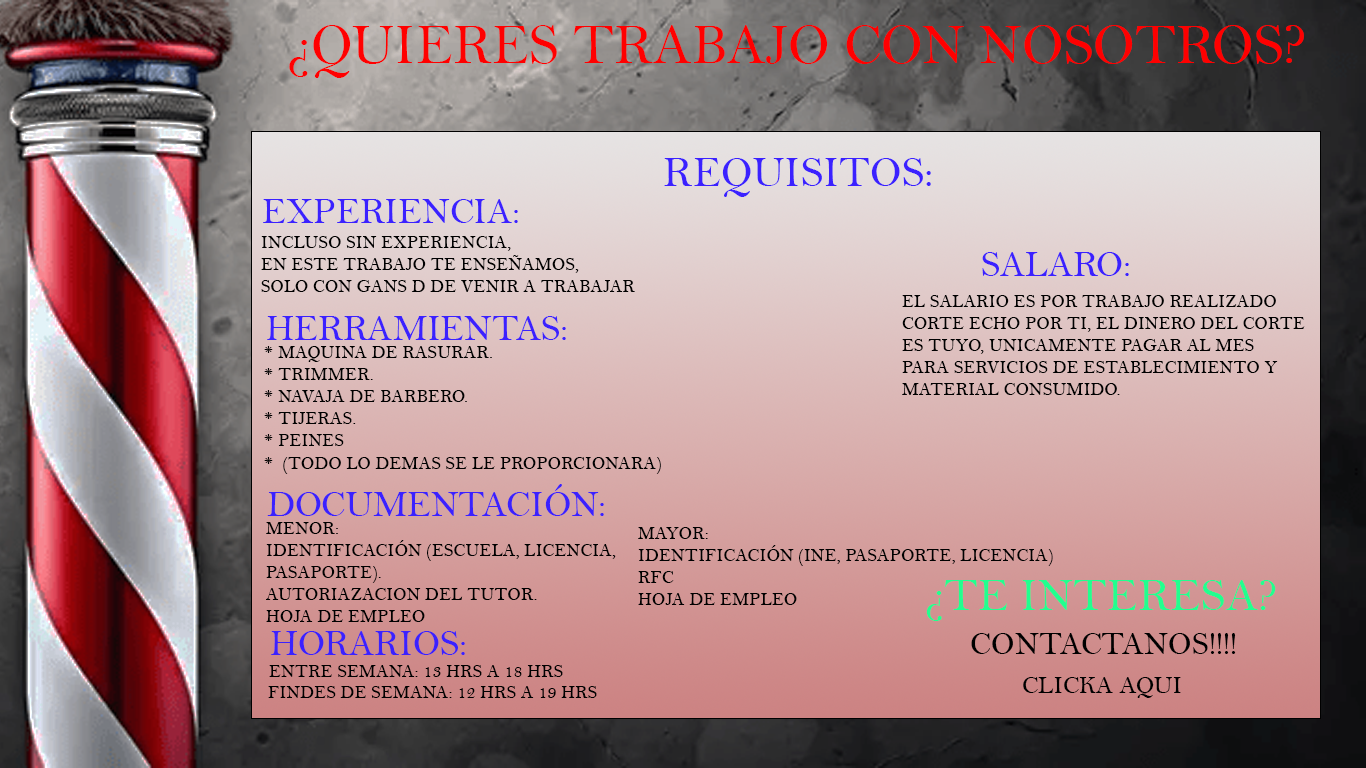
<style>
.page{position:relative;width:1366px;height:768px}
.page>*{position:absolute;margin:0}
.t1{font:57px "BellMT";color:#ff0000;text-transform:uppercase}
.t2{font:43.3px "BellMT";color:#3b21ff;text-transform:uppercase}
.t3{font:36.6px "BellMT";color:#3b21ff;text-transform:uppercase}
.t4{font:18.4px "BellMT";color:#000000;text-transform:uppercase}
.t5{font:47.1px "BellMT";color:#21ff8f;text-transform:uppercase}
.t6{font:32.1px "BellMT";color:#000000;text-transform:uppercase}
.t7{font:25px "BellMT";color:#000000;text-transform:uppercase}
</style>
<div class="page">
<p class="t1" style="left:289px;top:25px;width:1015px;height:53px">¿quieres trabajo con nosotros?</p>
<p class="t2" style="left:664px;top:158px;width:267px;height:39px">rEQUISITOS:</p>
<p class="t3" style="left:263px;top:199px;width:255px;height:24px">Experiencia:</p>
<p class="t4" style="left:261px;top:236px;width:374px;height:56px">Incluso sin experiencia, <br>en este trabajo te enseñamos, <br>solo con gans d de venir a trabajar</p>
<p class="t3" style="left:982px;top:252px;width:147px;height:24px">Salaro:</p>
<p class="t4" style="left:902px;top:295px;width:403px;height:100px">El salario es por trabajo realizado<br>corte echo por ti, el dinero del corte <br>es tuyo, unicamente pagar al mes <br>para servicios de establecimiento y <br>material consumido.</p>
<p class="t3" style="left:267px;top:316px;width:299px;height:24px">Herramientas:</p>
<p class="t4" style="left:264px;top:346px;width:397px;height:128px">Maquina de rasurar.<br>Trimmer.<br>Navaja de barbero.<br>Tijeras.<br>Peines <br>*  (Todo lo demas se le proporcionara)</p>
<p class="t3" style="left:267px;top:484px;width:337px;height:32px">Documentación:</p>
<p class="t4" style="left:266px;top:522px;width:350px;height:100px">Menor:<br>Identificación (escuela, licencia, <br>pasaporte).<br>Autoriazacion del tutor.<br>hoja de empleo</p>
<p class="t4" style="left:638px;top:527px;width:415px;height:78px">Mayor:<br>Identificación (Ine, pasaporte, licencia)<br>RFC<br>hoja de empleo</p>
<p class="t5" style="left:926px;top:580px;width:350px;height:41px">¿Te interesa?</p>
<p class="t3" style="left:271px;top:631px;width:194px;height:24px">Horarios:</p>
<p class="t6" style="left:971px;top:633px;width:265px;height:21px">Contactanos!!!!</p>
<p class="t4" style="left:269px;top:665px;width:294px;height:12px">Entre semana: 13 hrs a 18 hrs</p>
<p class="t7" style="left:1023px;top:677px;width:158px;height:21px">Clicka aqui</p>
<p class="t4" style="left:268px;top:686px;width:329px;height:12px">Findes de semana: 12 hrs a 19 hrs</p>
</div>
